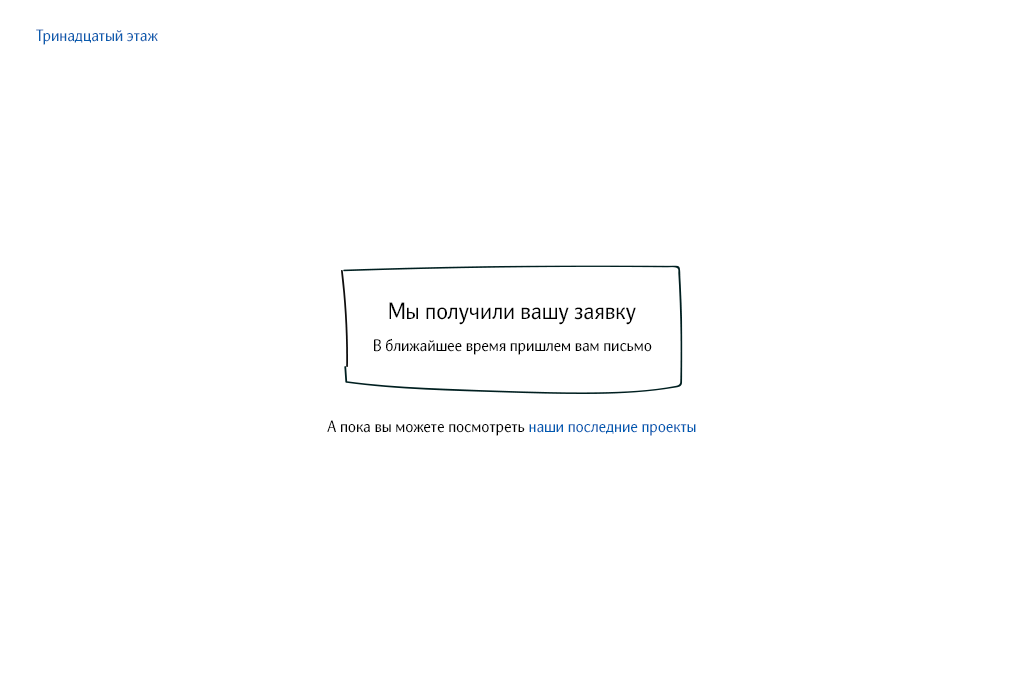
<style>
.page{position:relative;width:1024px;height:700px;background:#ffffff}
.page>*{position:absolute;margin:0}
.t1{font:16px "NatGrotesk-Regular";color:#0b5cae}
.t2{font:23px "NatGrotesk-Regular";color:#000000}
.t3{font:16px "NatGrotesk-Regular";color:#000000}
.t4{font:16px "NatGrotesk-Regular";color:#005ab1}
</style>
<div class="page">
<p class="t1" style="left:36px;top:29px;width:122px;height:16px">Тринадцатый этаж</p>
<p class="t2" style="left:389px;top:302px;width:247px;height:23px">Мы получили вашу заявку</p>
<p class="t3" style="left:374px;top:338px;width:278px;height:17px">В ближайшее время пришлем вам письмо</p>
<p class="t3" style="left:327px;top:420px;width:369px;height:16px">А пока вы можете посмотреть <span class="t4">наши последние проекты</span></p>
</div>
